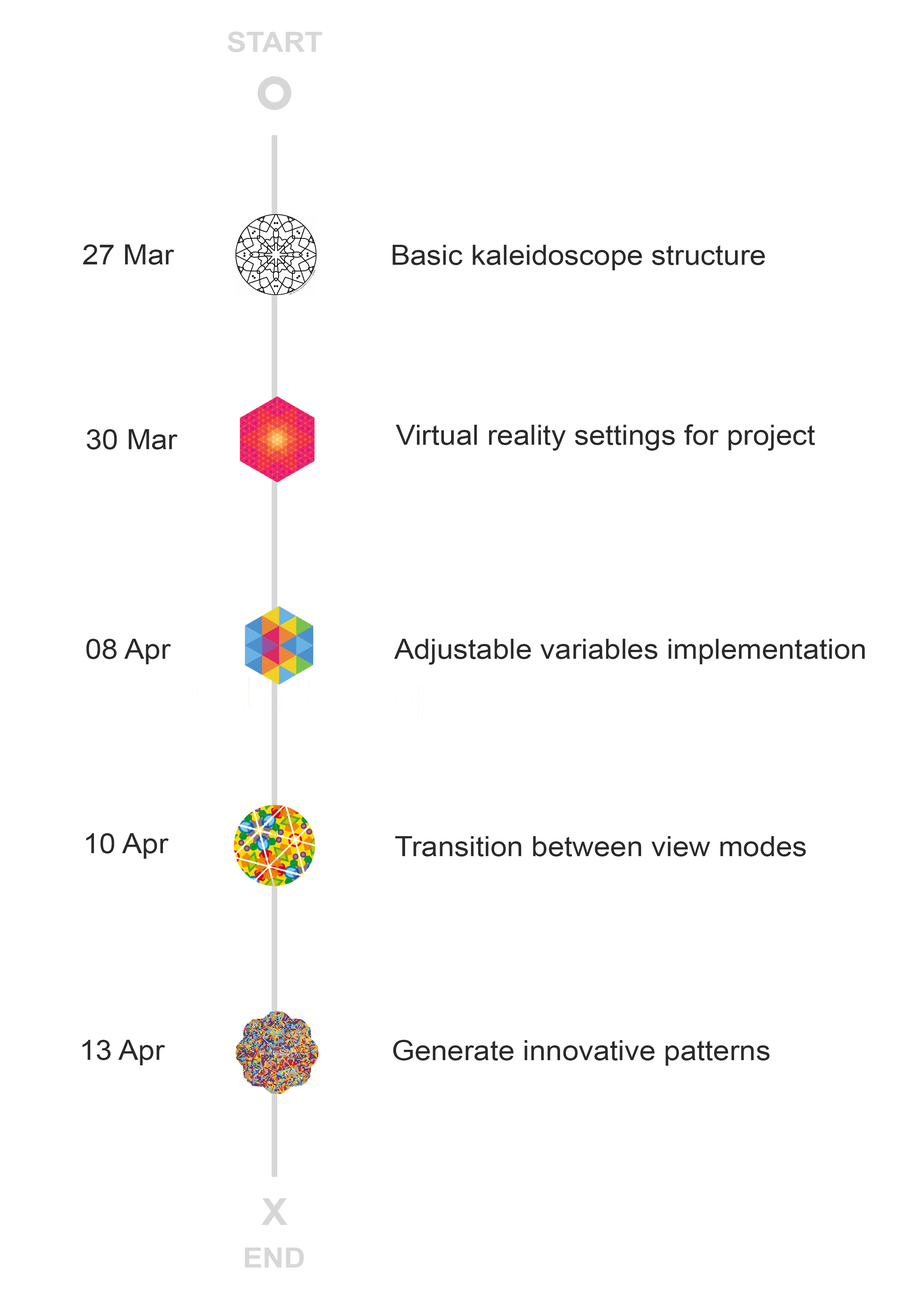
<style>
.page{position:relative;width:918px;height:1299px;background:#ffffff}
.page>*{position:absolute;margin:0}
.t1{font:27.8px "Arial-BoldMT";color:#d7d7d7;scale:1.06 1}
.t2{font:27.8px "ArialMT";color:#2a2a2a;scale:1.06 1}
.t3{font:37px "Arial-BoldMT";color:#d7d7d7;scale:1.06 1}
</style>
<div class="page">
<p class="t1" style="left:227px;top:31px;width:95px;height:21px">START</p>
<p class="t2" style="left:83px;top:244px;width:91px;height:21px">27 Mar</p>
<p class="t2" style="left:392px;top:245px;width:373px;height:25px">Basic kaleidoscope structure</p>
<p class="t2" style="left:396px;top:424px;width:419px;height:27px">Virtual reality settings for project</p>
<p class="t2" style="left:87px;top:429px;width:91px;height:20px">30 Mar</p>
<p class="t2" style="left:86px;top:639px;width:85px;height:25px">08 Apr</p>
<p class="t2" style="left:394px;top:639px;width:471px;height:26px">Adjustable variables implementation</p>
<p class="t2" style="left:86px;top:833px;width:83px;height:26px">10 Apr</p>
<p class="t2" style="left:395px;top:836px;width:411px;height:20px">Transition between view modes</p>
<p class="t2" style="left:82px;top:1040px;width:83px;height:25px">13 Apr</p>
<p class="t2" style="left:393px;top:1040px;width:377px;height:25px">Generate innovative patterns</p>
<p class="t3" style="left:261px;top:1198px;width:27px;height:27px">X</p>
<p class="t1" style="left:245px;top:1247px;width:59px;height:20px">END</p>
</div>
